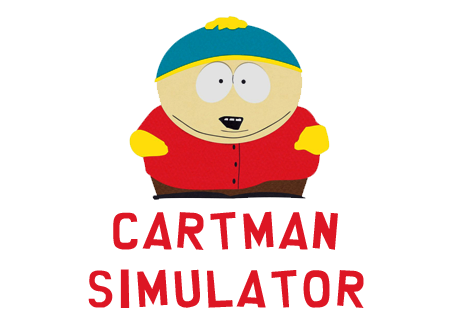
<style>
.page{position:relative;width:460px;height:320px;background:#ffffff}
.page>*{position:absolute;margin:0}
.t1{font:48px "southpark";color:#dd1624}
</style>
<div class="page">
<p class="t1" style="left:88px;top:211px;width:276px;height:97px;text-align:center">CARTMAN<br>SIMULATOR</p>
</div>
